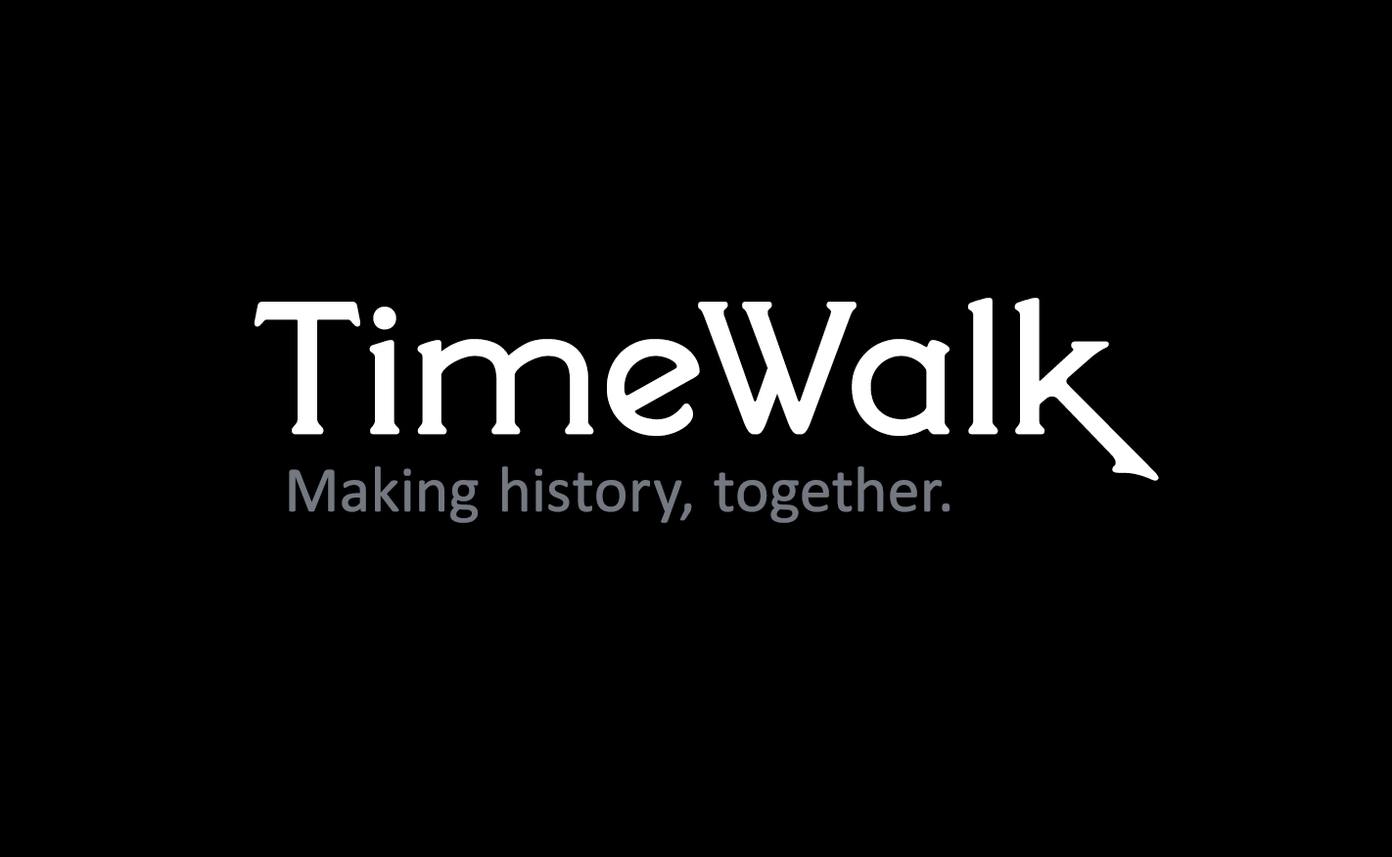
<style>
.page{position:relative;width:1392px;height:857px;background:#000000}
.page>*{position:absolute;margin:0}
.t1{font:64.6px "Calibri";color:#737881;font-weight:bold}
.t2{font:195.8px "SilentinaFilm";color:#ffffff;font-weight:bold}
</style>
<div class="page">
<p class="t1" style="left:255px;top:298px;width:904px;height:225px"><span class="t2">TimeWalk<br>  </span>Making history, together.</p>
</div>
